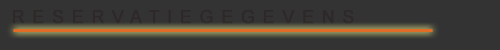
<style>
.page{position:relative;width:500px;height:50px;background:#333333}
.page>*{position:absolute;margin:0}
.t1{font:18px "ArialMT";letter-spacing:0.4em;color:#2e2828;font-weight:bold}
</style>
<div class="page">
<p class="t1" style="left:13px;top:9px;width:341px;height:15px">RESERVATIEGEGEVENS</p>
</div>
